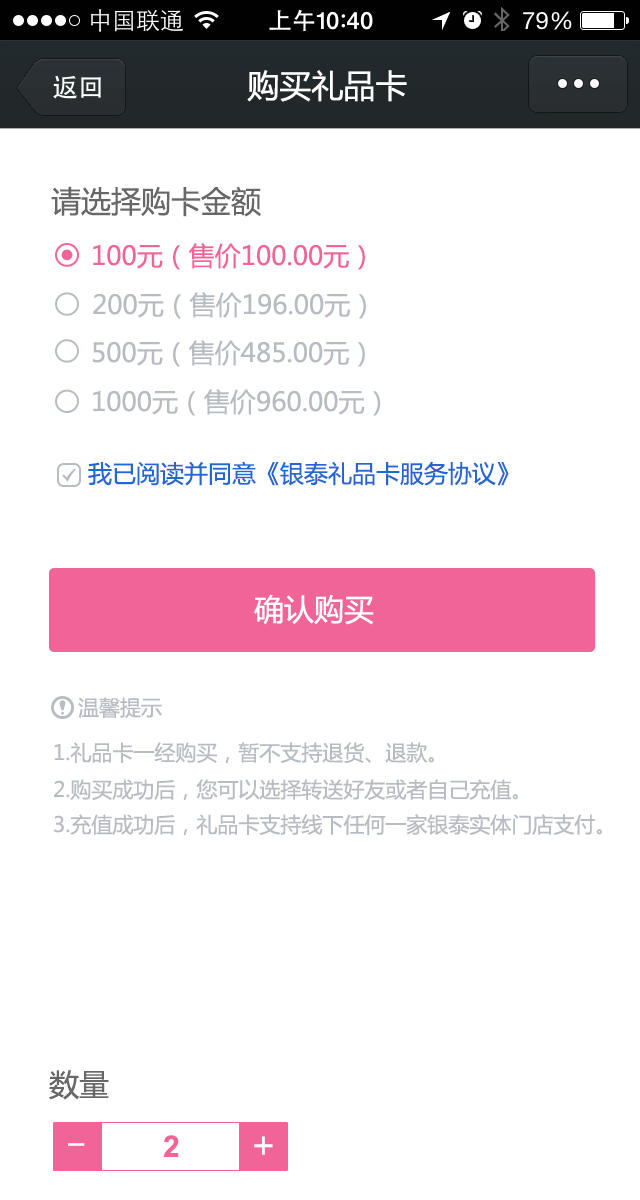
<style>
.page{position:relative;width:640px;height:1200px;background:#ffffff}
.page>*{position:absolute;margin:0}
.t1{font:32px "MicrosoftYaHei";color:#ffffff}
.t2{font:30px "MicrosoftYaHei";color:#676767}
.t3{font:26px "MicrosoftYaHei";color:#f16498}
.t4{font:26px "MicrosoftYaHei";color:#b7bbc2}
.t5{font:24px "MicrosoftYaHei";color:#2466d2}
.t6{font:30px "MicrosoftYaHei";color:#ffffff}
.t7{font:21px "MicrosoftYaHei";color:#b7bbc2}
.t8{font:36px "MicrosoftYaHei";color:#ffffff}
.t9{font:30px "Arial-BoldMT";color:#f16498}
</style>
<div class="page">
<p class="t1" style="left:247px;top:70px;width:160px;height:32px">购买礼品卡</p>
<p class="t2" style="left:51px;top:186px;width:210px;height:31px">请选择购卡金额</p>
<p class="t3" style="left:93px;top:243px;width:272px;height:27px">100元（售价100.00元）</p>
<p class="t4" style="left:93px;top:292px;width:273px;height:27px">200元（售价196.00元）</p>
<p class="t4" style="left:93px;top:340px;width:272px;height:27px">500元（售价485.00元）</p>
<p class="t4" style="left:93px;top:389px;width:288px;height:27px">1000元（售价960.00元）</p>
<p class="t5" style="left:88px;top:461px;width:421px;height:25px">我已阅读并同意《银泰礼品卡服务协议》</p>
<p class="t6" style="left:254px;top:594px;width:120px;height:31px">确认购买</p>
<p class="t7" style="left:78px;top:697px;width:84px;height:21px">温馨提示</p>
<p class="t7" style="left:54px;top:742px;width:380px;height:21px">1.礼品卡一经购买，暂不支持退货、退款。</p>
<p class="t7" style="left:54px;top:779px;width:464px;height:21px">2.购买成功后，您可以选择转送好友或者自己充值。</p>
<p class="t7" style="left:54px;top:814px;width:548px;height:21px">3.充值成功后，礼品卡支持线下任何一家银泰实体门店支付。</p>
<p class="t2" style="left:49px;top:1070px;width:60px;height:30px">数量</p>
<p class="t8" style="left:68px;top:1143px;width:17px;height:3px">_</p>
<p class="t9" style="left:163px;top:1135px;width:16px;height:22px">2</p>
<p class="t8" style="left:254px;top:1136px;width:19px;height:19px">+</p>
</div>
